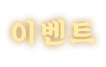
<style>
.page{position:relative;width:106px;height:67px;background:#ffffff}
.page>*{position:absolute;margin:0}
.t1{font:28.6px "SDKukdetopokki-bBd";letter-spacing:0.12em;color:#ffeca9}
</style>
<div class="page">
<p class="t1" style="left:12px;top:19px;width:83px;height:26px">이벤트</p>
</div>
